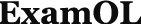
<style>
.page{position:relative;width:141px;height:24px;background:#ffffff}
.page>*{position:absolute;margin:0}
.t1{font:55.8px "Vani-Bold";color:#0d0d0d}
</style>
<div class="page">
<p class="t1" style="left:0px;top:0px;width:142px;height:25px">ExamOL</p>
</div>
